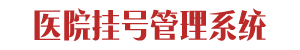
<style>
.page{position:relative;width:300px;height:50px;background:#ffffff}
.page>*{position:absolute;margin:0}
.t1{font:33.1px "BenmoJinsong";letter-spacing:0.05em;color:#bb2929;scale:0.84 1}
</style>
<div class="page">
<p class="t1" style="left:34px;top:8px;width:232px;height:33px">医院挂号管理系统</p>
</div>
